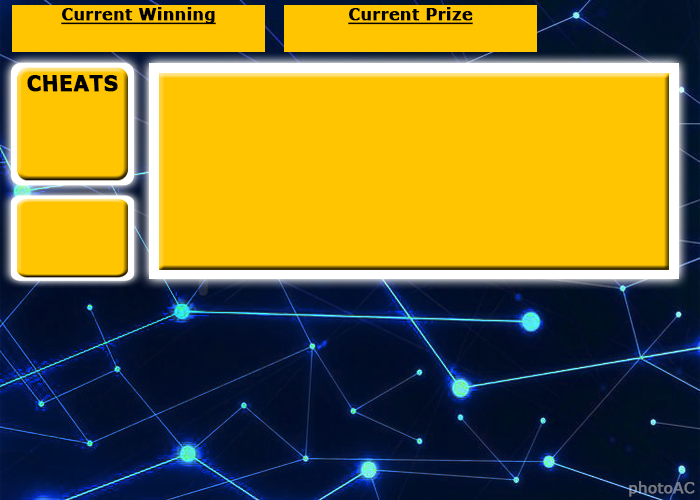
<style>
.page{position:relative;width:700px;height:500px;background:#ffc501}
.page>*{position:absolute;margin:0}
.t1{font:16px "Verdana-Bold";color:#000000;font-weight:bold;text-decoration:underline}
.t2{font:22.3px "Verdana-Bold";color:#000000;font-weight:bold;scale:0.9 1}
.t3{font:15px "Verdana";color:#757a84;font-weight:bold}
</style>
<div class="page">
<p class="t1" style="left:61px;top:7px;width:155px;height:18px">Current Winning</p>
<p class="t1" style="left:348px;top:7px;width:125px;height:18px">Current Prize</p>
<p class="t2" style="left:27px;top:75px;width:91px;height:17px">CHEATS</p>
<p class="t3" style="left:629px;top:481px;width:66px;height:16px">photoAC</p>
</div>
